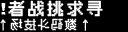
<style>
.page{position:relative;width:128px;height:32px;background:#000000}
.page>*{position:absolute;margin:0}
.t1{font:16px "Ark-Pixel-12px-Monospaced-zh_cn-Regular";color:#ffffff;font-weight:bold}
.t2{font:12px "Ark-Pixel-12px-Monospaced-zh_cn-Regular";color:#ffffff}
</style>
<div class="page">
<p class="t1" style="left:8px;top:0px;width:95px;height:17px">者 战 挑 求 寻</p>
<p class="t2" style="left:10px;top:18px;width:67px;height:13px;rotate:180deg">数 码 斗 技 场</p>
</div>
